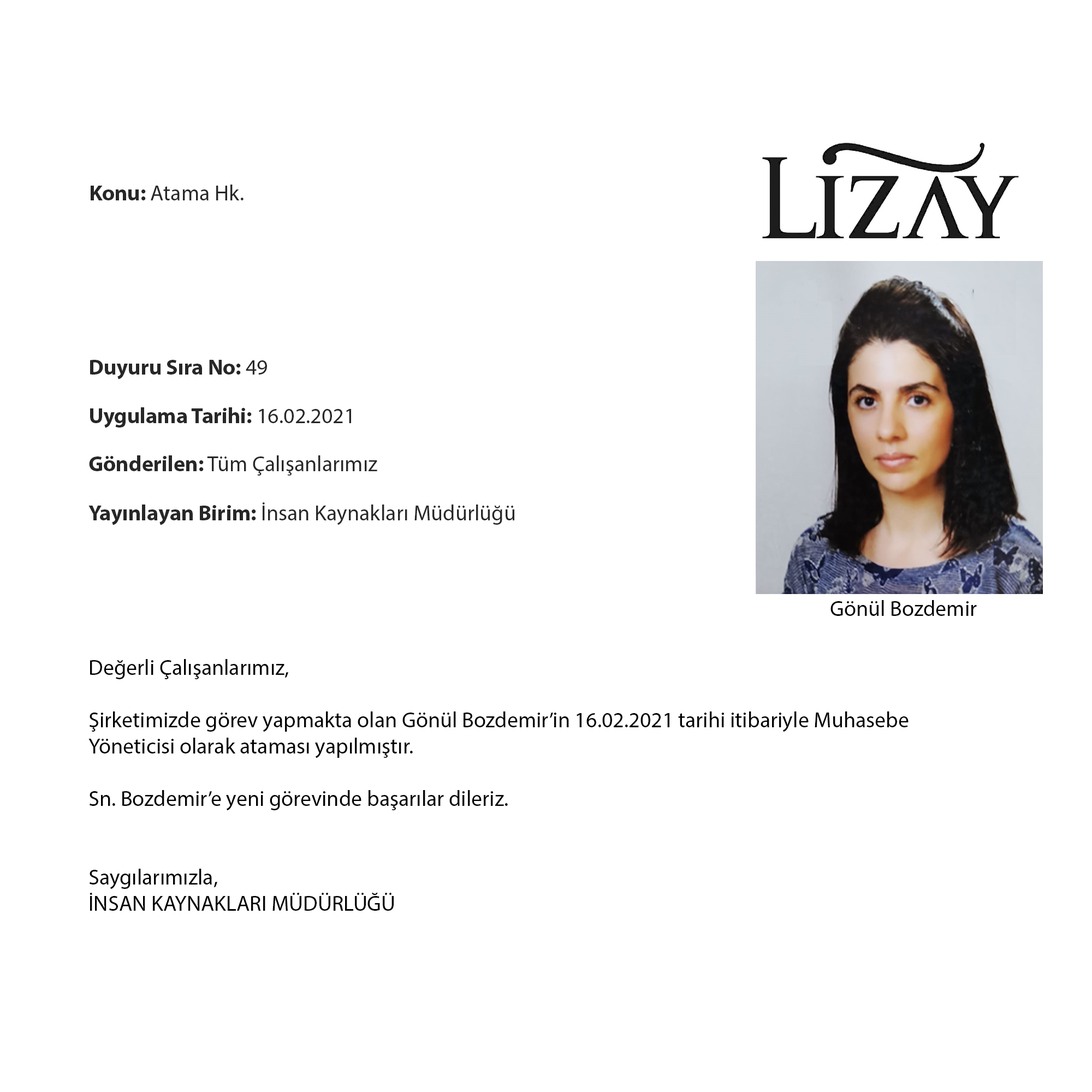
<style>
.page{position:relative;width:1092px;height:1092px;background:#ffffff}
.page>*{position:absolute;margin:0}
.t1{font:21.8px "MyriadPro-Regular";color:#272727}
.t2{font:21.8px "MyriadPro-Bold";color:#272727}
.t3{font:21.8px "MyriadPro-Regular";color:#000000}
</style>
<div class="page">
<p class="t1" style="left:91px;top:185px;width:153px;height:15px"><span class="t2">Konu: </span>Atama Hk.</p>
<p class="t2" style="left:90px;top:360px;width:177px;height:19px">Duyuru Sıra No: <span class="t1">49</span></p>
<p class="t2" style="left:90px;top:407px;width:261px;height:21px">Uygulama Tarihi: <span class="t1">16.02.2021</span></p>
<p class="t1" style="left:89px;top:455px;width:288px;height:21px"><span class="t2">Gönderilen:</span> Tüm Çalışanlarımız</p>
<p class="t1" style="left:88px;top:502px;width:427px;height:23px"><span class="t2">Yayınlayan Birim:</span> İnsan Kaynakları Müdürlüğü</p>
<p class="t3" style="left:830px;top:600px;width:147px;height:16px">Gönül Bozdemir</p>
<p class="t3" style="left:88px;top:659px;width:821px;height:252px">Değerli Çalışanlarımız, <br><br>Şirketimizde görev yapmakta olan Gönül Bozdemir’in 16.02.2021 tarihi itibariyle Muhasebe Yöneticisi olarak ataması yapılmıştır.<br><br>Sn. Bozdemir’e yeni görevinde başarılar dileriz.<br><br><br>Saygılarımızla,<br>İNSAN KAYNAKLARI MÜDÜRLÜĞÜ</p>
</div>
